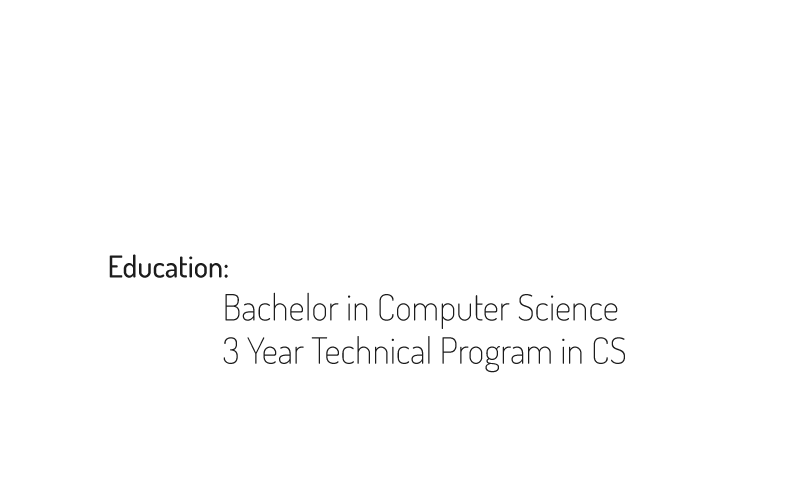
<style>
.page{position:relative;width:800px;height:500px;background:#ffffff}
.page>*{position:absolute;margin:0}
.t1{font:30px "Dosis-Medium";color:#1c1c1c}
.t2{font:36px "Dosis-ExtraLight";color:#1c1c1c}
</style>
<div class="page">
<p class="t1" style="left:109px;top:254px;width:119px;height:24px">Education:</p>
<p class="t2" style="left:223px;top:292px;width:402px;height:81px">Bachelor in Computer Science<br>3 Year Technical Program in CS</p>
</div>
